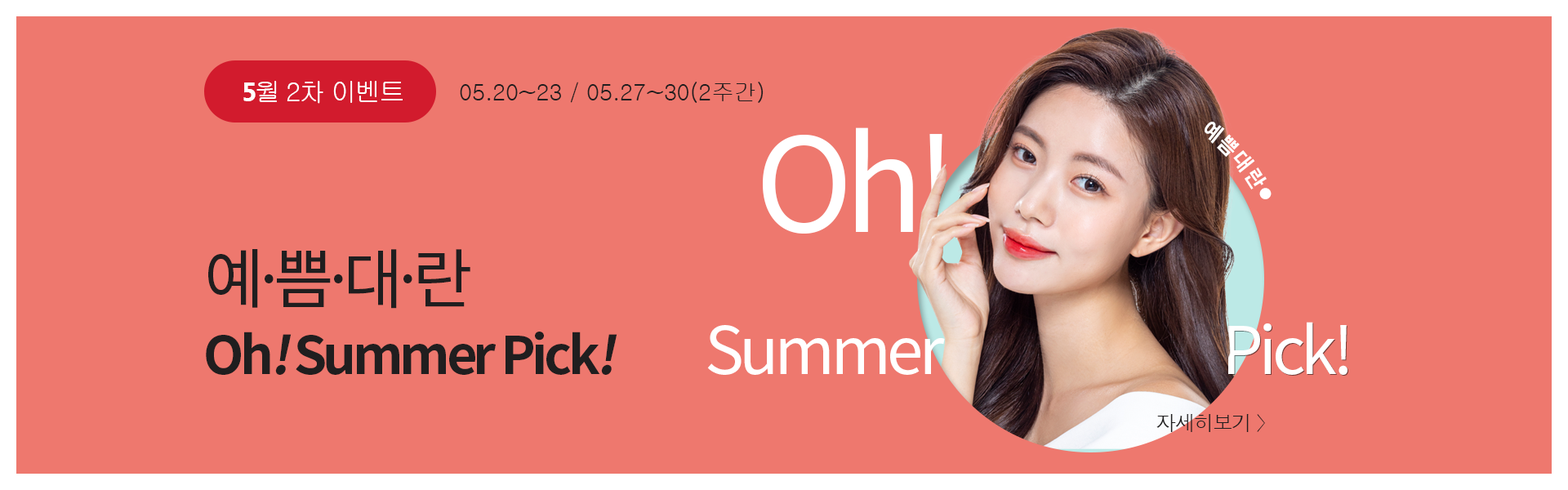
<style>
.page{position:relative;width:1568px;height:490px;background:#ee786e}
.page>*{position:absolute;margin:0}
.t1{font:26.1px "Gulim";letter-spacing:-0.07em;color:#ffffff}
.t2{font:26.1px "MyanmarText-Bold";letter-spacing:-0.07em;color:#ffffff}
.t3{font:22.9px "Gulim";letter-spacing:-0.007em;color:#201e1f}
.t4{font:20.4px/74.3px "NotoSansKR-Bold";letter-spacing:-0.07em;color:#ffffff}
.t5{font:12.2px/74.3px "NotoSansKR-Bold";letter-spacing:-0.07em;color:#ffffff}
.t6{font:130.7px "NotoSansKR-Regular";letter-spacing:-0.07em;color:#ffffff}
.t7{font:65.3px "NotoSansKR-Regular";letter-spacing:-0.07em;color:#201e1f}
.t8{font:65.3px "NotoSansKR-Regular";letter-spacing:-0.07em;color:#ffffff}
.t9{font:52.3px "NotoSansKR-Bold";letter-spacing:-0.07em;color:#201e1f}
.t10{font:52.3px "NotoSansKR-Bold";letter-spacing:-0.07em;color:#201e1f;font-style:italic}
.t11{font:20.4px "Dotum";letter-spacing:-0.07em;color:#201e1f}
</style>
<div class="page">
<p class="t1" style="left:243px;top:81px;width:160px;height:23px"><span class="t2">5</span>월 2차 이벤트</p>
<p class="t3" style="left:460px;top:82px;width:304px;height:21px">05.20~23 / 05.27~30(2주간)</p>
<p class="t4" style="left:1205px;top:122px;width:67px;height:77px">예 쁨 대 란 <span class="t5">●</span></p>
<p class="t6" style="left:763px;top:127px;width:182px;height:107px">Oh!</p>
<p class="t7" style="left:208px;top:249px;width:262px;height:60px">예.쁨.대.란</p>
<p class="t8" style="left:707px;top:325px;width:238px;height:50px">Summer</p>
<p class="t8" style="left:1228px;top:322px;width:120px;height:53px">Pick!</p>
<p class="t9" style="left:206px;top:332px;width:411px;height:43px">Oh<span class="t10">!</span> Summer Pick<span class="t10">!</span></p>
<p class="t11" style="left:1156px;top:414px;width:109px;height:18px">자세히보기 〉</p>
</div>
